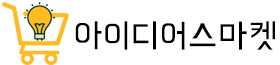
<style>
.page{position:relative;width:280px;height:65px;background:#ffffff}
.page>*{position:absolute;margin:0}
.t1{font:36px "BMHANNAAir";letter-spacing:0.01em;color:#000000}
</style>
<div class="page">
<p class="t1" style="left:75px;top:21px;width:200px;height:29px">아이디어스마켓</p>
</div>
